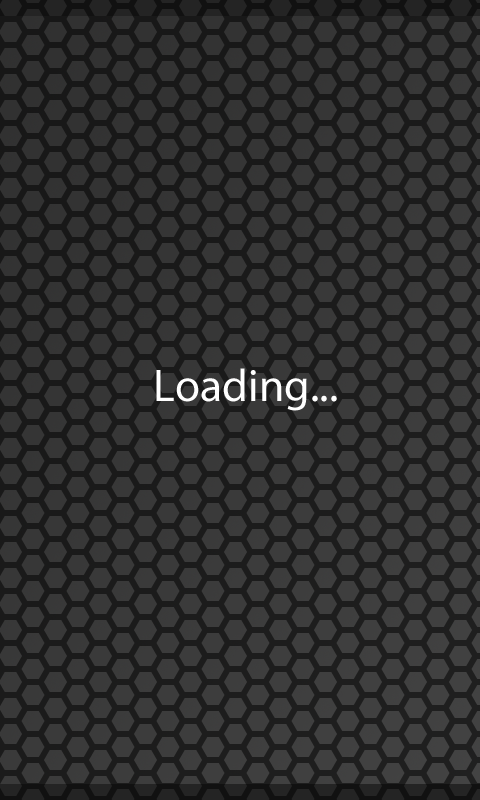
<style>
.page{position:relative;width:480px;height:800px}
.page>*{position:absolute;margin:0}
.t1{font:45.8px "MyriadPro-Regular";color:#ffffff}
</style>
<div class="page">
<p class="t1" style="left:156px;top:368px;width:181px;height:43px">Loading...</p>
</div>
